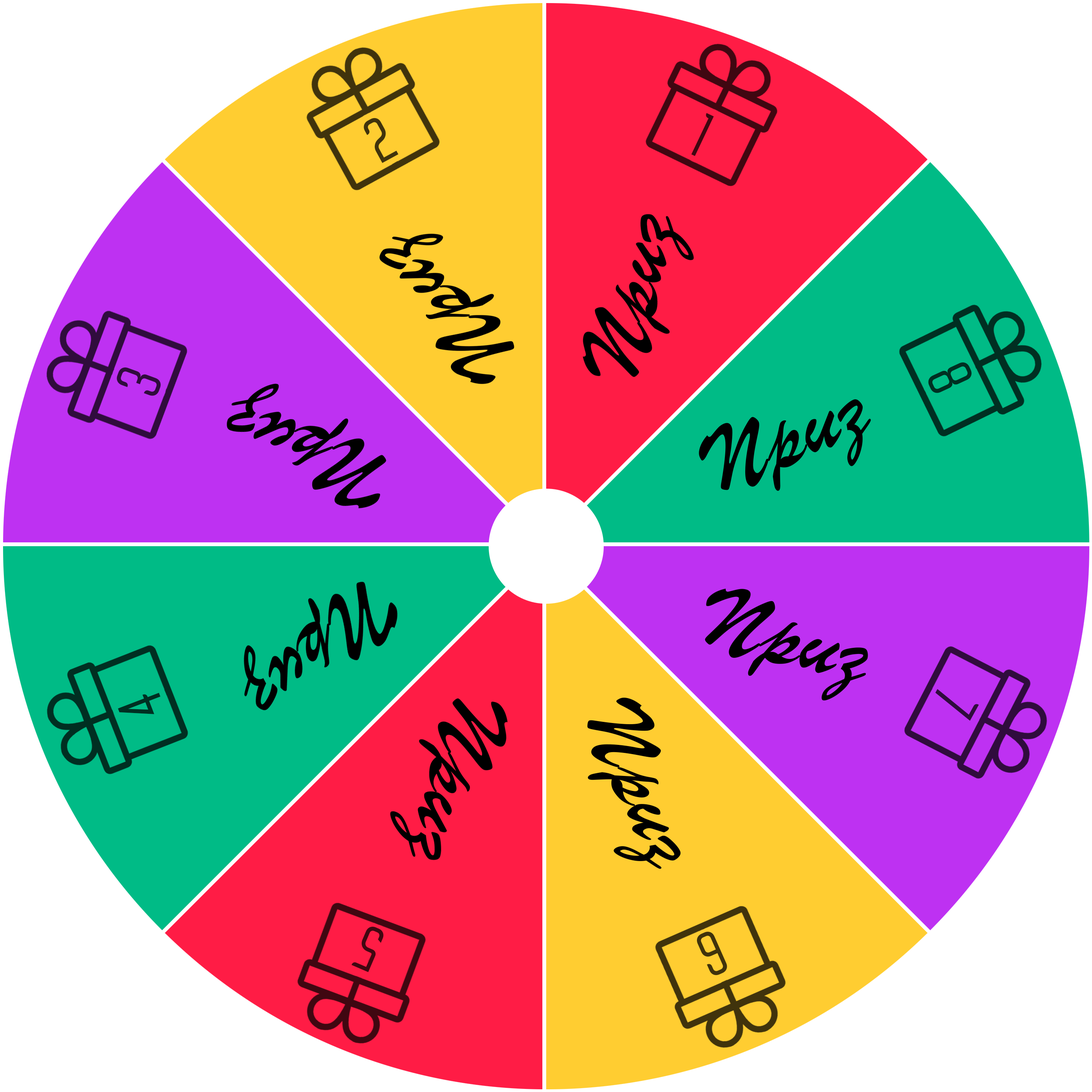
<style>
.page{position:relative;width:1092px;height:1092px;background:#ffffff}
.page>*{position:absolute;margin:0}
.t1{font:60.9px "Buyan-Regular";color:#400711}
.t2{font:60.9px "Buyan-Regular";color:#40330c}
.t3{font:87.2px "ParsekCyrillic";color:#000000}
.t4{font:60.9px "Buyan-Regular";color:#002f22}
.t5{font:60.9px "Buyan-Regular";color:#300c3d}
</style>
<div class="page">
<p class="t1" style="left:691px;top:113px;width:23px;height:43px;rotate:25deg">1</p>
<p class="t2" style="left:364px;top:118px;width:35px;height:45px;rotate:-29deg">2</p>
<p class="t3" style="left:583px;top:214px;width:111px;height:163px;rotate:-77deg">Приз</p>
<p class="t3" style="left:379px;top:233px;width:135px;height:151px;rotate:-137deg">Приз</p>
<p class="t4" style="left:928px;top:362px;width:44px;height:31px;rotate:65deg">8</p>
<p class="t5" style="left:117px;top:367px;width:44px;height:29px;rotate:-70deg">3</p>
<p class="t3" style="left:226px;top:384px;width:160px;height:125px;rotate:-159deg">Приз</p>
<p class="t3" style="left:699px;top:399px;width:172px;height:92px;rotate:-24deg">Приз</p>
<p class="t3" style="left:244px;top:581px;width:154px;height:130px;rotate:137deg">Приз</p>
<p class="t3" style="left:705px;top:588px;width:163px;height:113px;rotate:13deg">Приз</p>
<p class="t5" style="left:935px;top:689px;width:44px;height:32px;rotate:119deg">7</p>
<p class="t4" style="left:118px;top:693px;width:43px;height:21px;rotate:-111deg">4</p>
<p class="t3" style="left:390px;top:698px;width:118px;height:162px;rotate:106deg">Приз</p>
<p class="t3" style="left:587px;top:697px;width:94px;height:172px;rotate:65deg">Приз</p>
<p class="t1" style="left:351px;top:927px;width:33px;height:45px;rotate:-157deg">5</p>
<p class="t2" style="left:697px;top:932px;width:30px;height:43px;rotate:156deg">6</p>
</div>
